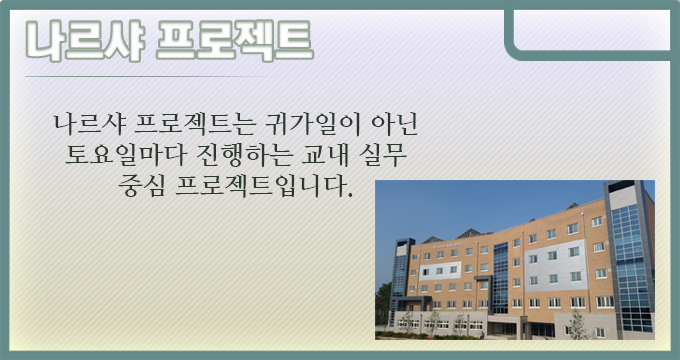
<style>
.page{position:relative;width:680px;height:360px}
.page>*{position:absolute;margin:0}
.t1{font:44px "KoreanTITGD5-R";letter-spacing:-0.01em;color:#ffffff}
.t2{font:26px "NanumMyeongjoBold";letter-spacing:-0.01em;color:#2a382e}
</style>
<div class="page">
<p class="t1" style="left:27px;top:21px;width:286px;height:40px">나르샤 프로젝트</p>
<p class="t2" style="left:53px;top:112px;width:365px;height:86px;text-align:center">나르샤 프로젝트는 귀가일이 아닌 토요일마다 진행하는 교내 실무 중심 프로젝트입니다.</p>
</div>
